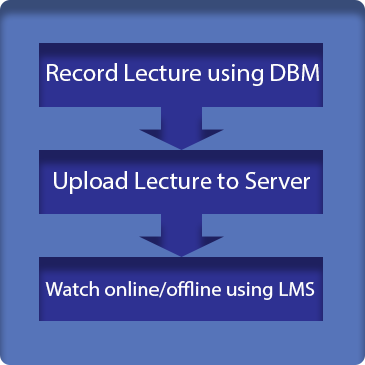
<style>
.page{position:relative;width:365px;height:365px;background:#5674b9}
.page>*{position:absolute;margin:0}
.t1{font:25px "MyriadPro-Regular";color:#ffffff}
.t2{font:20.8px "MyriadPro-Regular";color:#ffffff}
</style>
<div class="page">
<p class="t1" style="left:47px;top:63px;width:272px;height:23px">Record Lecture using DBM</p>
<p class="t1" style="left:54px;top:171px;width:256px;height:23px">Upload Lecture to Server</p>
<p class="t2" style="left:45px;top:281px;width:270px;height:19px">Watch online/offline using LMS</p>
</div>
